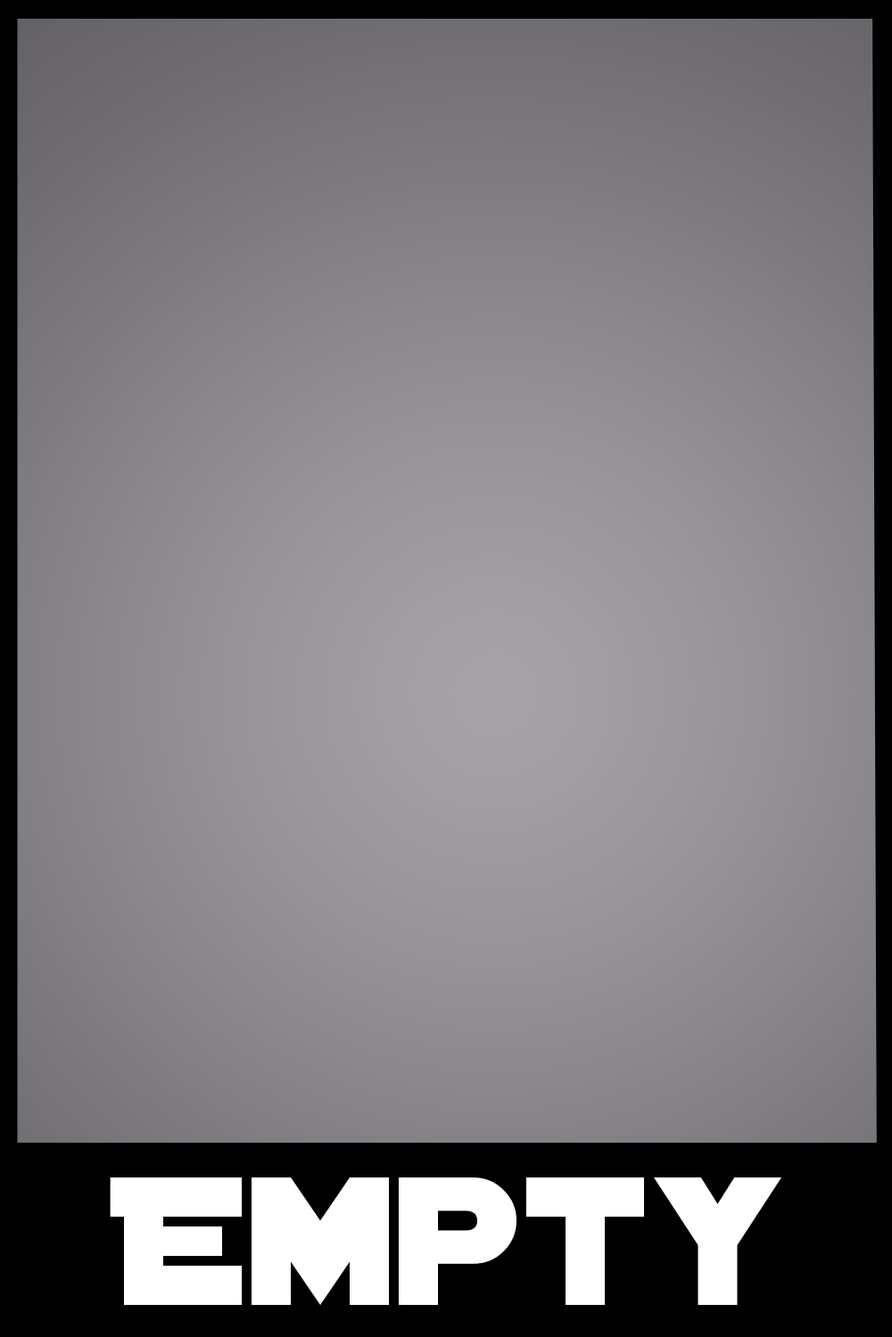
<style>
.page{position:relative;width:892px;height:1337px}
.page>*{position:absolute;margin:0}
.t1{font:196.2px "DistantGalaxy";color:#ffffff}
</style>
<div class="page">
<p class="t1" style="left:110px;top:1178px;width:671px;height:127px">Empty</p>
</div>
